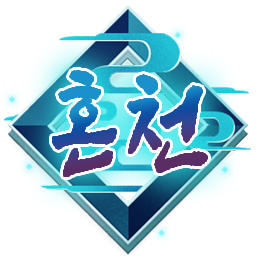
<style>
.page{position:relative;width:256px;height:256px;background:#ffffff}
.page>*{position:absolute;margin:0}
.t1{font:105.9px "SangSangRockOTF";letter-spacing:0.1em;scale:0.93 1}
</style>
<div class="page">
<p class="t1" style="left:53px;top:71px;width:154px;height:105px">혼천</p>
</div>
